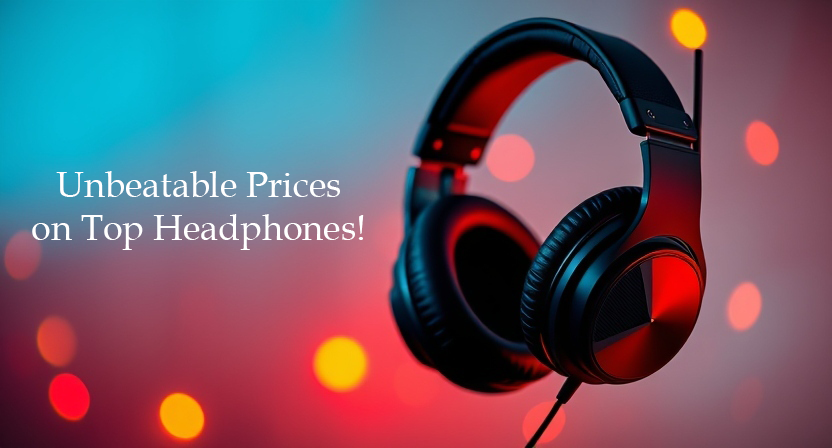
<style>
.page{position:relative;width:832px;height:448px}
.page>*{position:absolute;margin:0}
.t1{font:36px "BookAntiqua";color:#ffffff}
</style>
<div class="page">
<p class="t1" style="left:32px;top:171px;width:332px;height:79px;text-align:center">Unbeatable Prices <br>on Top Headphones!</p>
</div>
